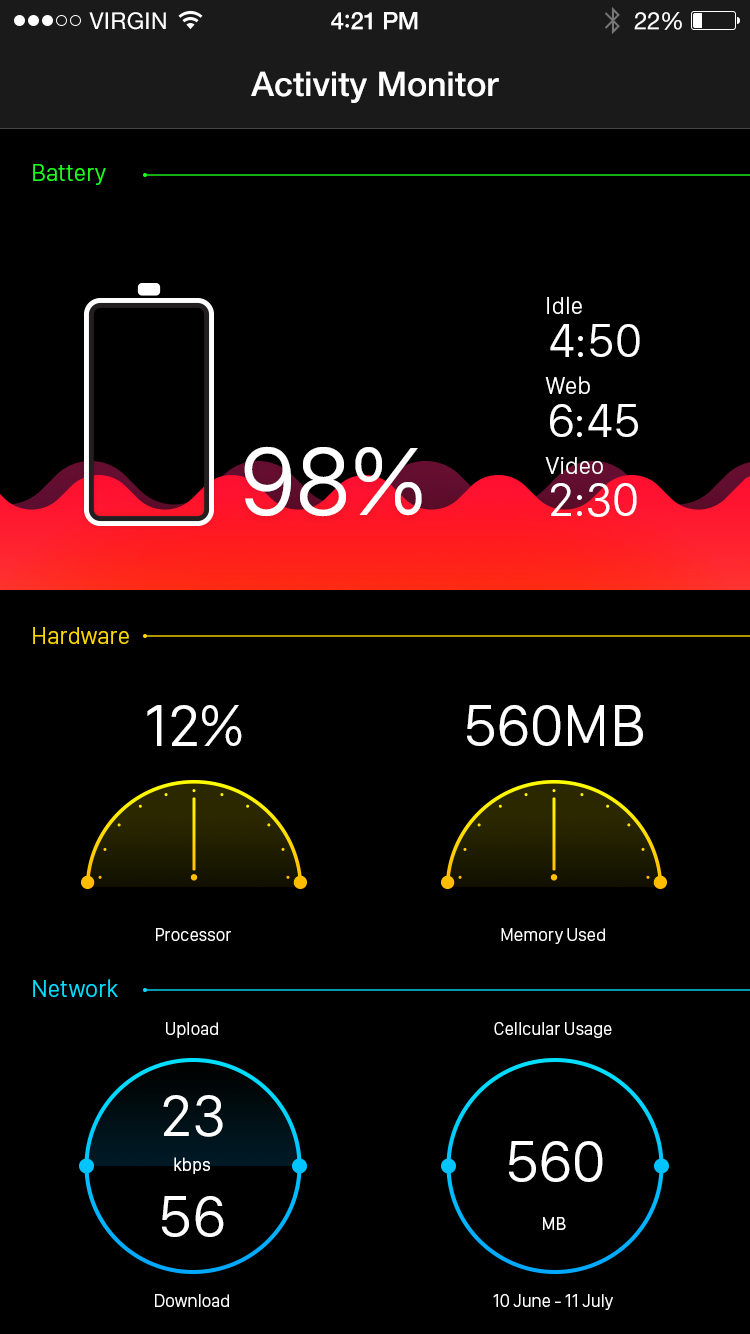
<style>
.page{position:relative;width:750px;height:1334px;background:#000000}
.page>*{position:absolute;margin:0}
.t1{font:23px "HelveticaNeue";letter-spacing:0.02em;color:#ffffff}
.t2{font:24px "HelveticaNeue-Medium";letter-spacing:-0.02em;color:#ffffff}
.t3{font:26px "Avenir-Medium";letter-spacing:-0.02em;color:#ffffff}
.t4{font:24px "HelveticaNeue";letter-spacing:-0.02em;color:#ffffff}
.t5{font:34px "HelveticaNeue-Medium";color:#ffffff}
.t6{font:24px "SanFranciscoDisplay-Light";color:#1cff1e}
.t7{font:24px "SanFranciscoDisplay-Light";color:#ffffff}
.t8{font:48px "SanFranciscoDisplay-Regular";color:#ffffff}
.t9{font:100px "SanFranciscoDisplay-Regular";color:#ffffff}
.t10{font:24px "SanFranciscoDisplay-Light";color:#ffd800}
.t11{font:60px "SanFranciscoDisplay-Regular";color:#ffffff}
.t12{font:18px "SanFranciscoDisplay-Light";color:#ffffff}
.t13{font:24px "SanFranciscoDisplay-Light";color:#00deff}
.t14{font:18px "SanFranciscoDisplay-Regular";color:#ffffff}
</style>
<div class="page">
<p class="t1" style="left:89px;top:12px;width:77px;height:18px">VIRGIN</p>
<p class="t2" style="left:331px;top:12px;width:87px;height:18px">4<span class="t3">:</span>21 PM</p>
<p class="t4" style="left:634px;top:12px;width:48px;height:18px">22%</p>
<p class="t5" style="left:251px;top:71px;width:248px;height:32px">Activity Monitor</p>
<p class="t6" style="left:33px;top:164px;width:73px;height:21px">Battery</p>
<p class="t7" style="left:547px;top:296px;width:35px;height:18px">Idle</p>
<p class="t8" style="left:550px;top:324px;width:90px;height:33px">4:50</p>
<p class="t7" style="left:545px;top:376px;width:45px;height:18px">Web</p>
<p class="t8" style="left:550px;top:404px;width:88px;height:33px">6:45</p>
<p class="t9" style="left:244px;top:446px;width:178px;height:71px">98%</p>
<p class="t7" style="left:545px;top:457px;width:58px;height:17px">Video</p>
<p class="t8" style="left:551px;top:483px;width:86px;height:34px">2:30</p>
<p class="t10" style="left:33px;top:627px;width:96px;height:17px">Hardware</p>
<p class="t11" style="left:147px;top:705px;width:95px;height:41px">12%</p>
<p class="t11" style="left:467px;top:705px;width:176px;height:41px">560MB</p>
<p class="t12" style="left:156px;top:928px;width:75px;height:13px">Processor</p>
<p class="t12" style="left:501px;top:928px;width:104px;height:16px">Memory Used</p>
<p class="t13" style="left:33px;top:979px;width:85px;height:18px">Network</p>
<p class="t12" style="left:166px;top:1022px;width:52px;height:16px">Upload</p>
<p class="t12" style="left:494px;top:1022px;width:118px;height:16px">Cellcular Usage</p>
<p class="t11" style="left:163px;top:1095px;width:60px;height:42px">23</p>
<p class="t11" style="left:509px;top:1141px;width:94px;height:41px">560</p>
<p class="t14" style="left:174px;top:1157px;width:36px;height:17px">kbps</p>
<p class="t11" style="left:162px;top:1196px;width:62px;height:41px">56</p>
<p class="t14" style="left:543px;top:1217px;width:23px;height:13px">MB</p>
<p class="t12" style="left:155px;top:1294px;width:74px;height:13px">Download</p>
<p class="t12" style="left:493px;top:1294px;width:120px;height:16px">10 June - 11 July</p>
</div>
